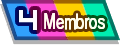
<style>
.page{position:relative;width:120px;height:45px}
.page>*{position:absolute;margin:0}
.t1{font:20px "RodinPro-DB";letter-spacing:-0.05em;color:#fffeef;scale:0.72 1}
</style>
<div class="page">
<p class="t1" style="left:44px;top:13px;width:61px;height:17px">Membros</p>
</div>
